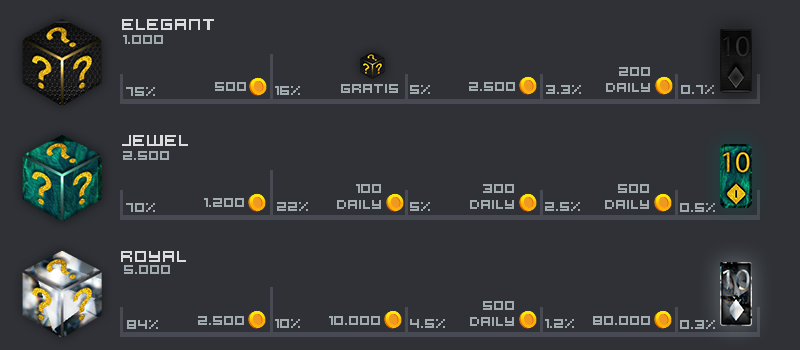
<style>
.page{position:relative;width:800px;height:350px;background:#2f3136}
.page>*{position:absolute;margin:0}
.t1{font:18px "Hooge0553";color:#dcdcdc}
.t2{font:14px "Hooge0553";color:#a1aaaf}
</style>
<div class="page">
<p class="t1" style="left:122px;top:19px;width:92px;height:11px">ELEGANT</p>
<p class="t2" style="left:123px;top:35px;width:40px;height:9px">1.000</p>
<p class="t2" style="left:606px;top:67px;width:44px;height:25px;text-align:right">200<br>Daily</p>
<p class="t2" style="left:126px;top:87px;width:29px;height:9px">75%</p>
<p class="t2" style="left:215px;top:82px;width:31px;height:9px">500</p>
<p class="t2" style="left:275px;top:86px;width:25px;height:9px">16%</p>
<p class="t2" style="left:341px;top:84px;width:57px;height:9px">Gratis</p>
<p class="t2" style="left:410px;top:85px;width:20px;height:9px">5%</p>
<p class="t2" style="left:469px;top:82px;width:46px;height:9px">2.500</p>
<p class="t2" style="left:546px;top:85px;width:35px;height:9px">3.3%</p>
<p class="t2" style="left:681px;top:85px;width:33px;height:9px">0.7%</p>
<p class="t1" style="left:122px;top:135px;width:66px;height:11px">JEWEL</p>
<p class="t2" style="left:123px;top:151px;width:46px;height:9px">2.500</p>
<p class="t2" style="left:337px;top:184px;width:44px;height:25px;text-align:right">100<br>Daily</p>
<p class="t2" style="left:470px;top:184px;width:44px;height:25px;text-align:right">300<br>Daily</p>
<p class="t2" style="left:605px;top:184px;width:44px;height:25px;text-align:right">500<br>Daily</p>
<p class="t2" style="left:204px;top:198px;width:40px;height:9px">1.200</p>
<p class="t2" style="left:126px;top:203px;width:29px;height:9px">70%</p>
<p class="t2" style="left:277px;top:202px;width:31px;height:9px">22%</p>
<p class="t2" style="left:410px;top:202px;width:20px;height:9px">5%</p>
<p class="t2" style="left:545px;top:202px;width:35px;height:9px">2.5%</p>
<p class="t2" style="left:680px;top:203px;width:35px;height:9px">0.5%</p>
<p class="t1" style="left:121px;top:251px;width:65px;height:11px">Royal</p>
<p class="t2" style="left:124px;top:265px;width:46px;height:9px">5.000</p>
<p class="t2" style="left:470px;top:301px;width:44px;height:25px;text-align:right">500<br>Daily</p>
<p class="t2" style="left:198px;top:316px;width:46px;height:9px">2.500</p>
<p class="t2" style="left:329px;top:316px;width:51px;height:9px">10.000</p>
<p class="t2" style="left:593px;top:316px;width:57px;height:9px">80.000</p>
<p class="t2" style="left:127px;top:320px;width:31px;height:9px">84%</p>
<p class="t2" style="left:275px;top:319px;width:25px;height:9px">10%</p>
<p class="t2" style="left:410px;top:319px;width:35px;height:9px">4.5%</p>
<p class="t2" style="left:545px;top:319px;width:29px;height:9px">1.2%</p>
<p class="t2" style="left:680px;top:320px;width:35px;height:9px">0.3%</p>
</div>
